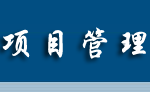
<style>
.page{position:relative;width:150px;height:92px;background:#014e82}
.page>*{position:absolute;margin:0}
.t1{font:36px "STXingkai";letter-spacing:0.075em;color:#ffffff}
</style>
<div class="page">
<p class="t1" style="left:2px;top:27px;width:145px;height:32px">项目管理</p>
</div>
